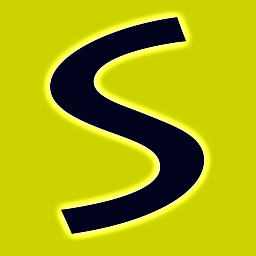
<style>
.page{position:relative;width:256px;height:256px;background:#ccd300}
.page>*{position:absolute;margin:0}
.t1{font:345.7px "LithosPro-Regular";color:#02021b;scale:1.37 1}
</style>
<div class="page">
<p class="t1" style="left:50px;top:17px;width:155px;height:217px">s</p>
</div>
